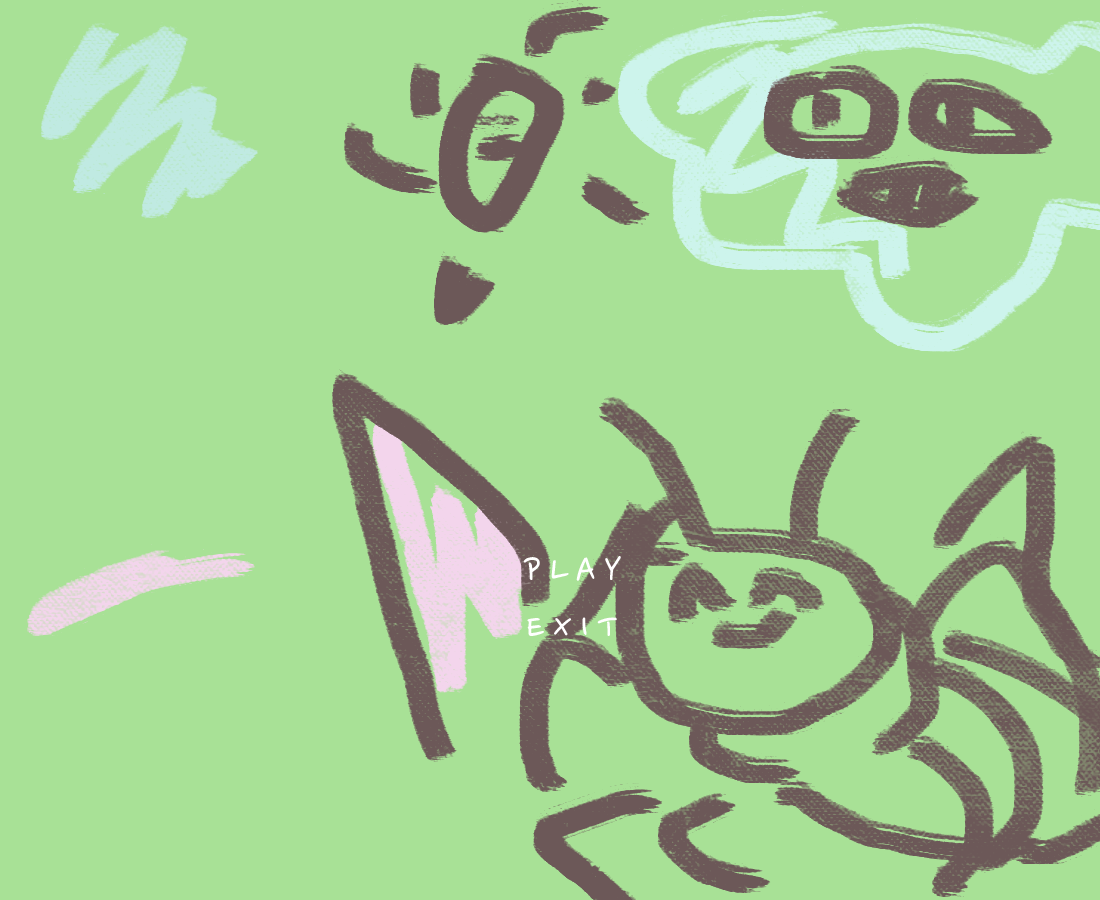
<style>
.page{position:relative;width:1100px;height:900px;background:#a8e196}
.page>*{position:absolute;margin:0}
.t1{font:41.7px "NanumPen";letter-spacing:0.2em;color:#ffffff}
</style>
<div class="page">
<p class="t1" style="left:523px;top:556px;width:98px;height:25px">PLAY</p>
<p class="t1" style="left:527px;top:617px;width:90px;height:19px">EXIT</p>
</div>
